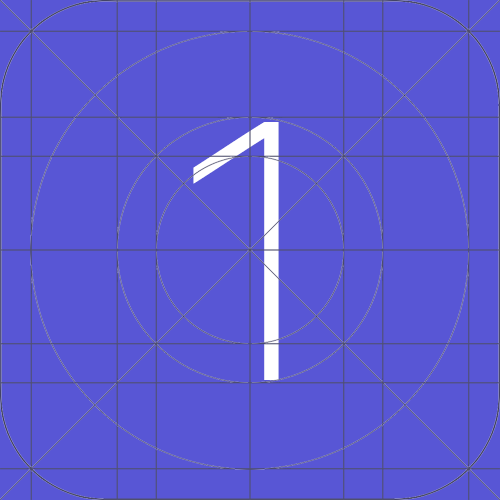
<style>
.page{position:relative;width:500px;height:500px;background:#5856d5}
.page>*{position:absolute;margin:0}
.t1{font:366px "SFUIDisplay-Thin";color:#ffffff}
</style>
<div class="page">
<p class="t1" style="left:193px;top:122px;width:86px;height:258px">1</p>
</div>
